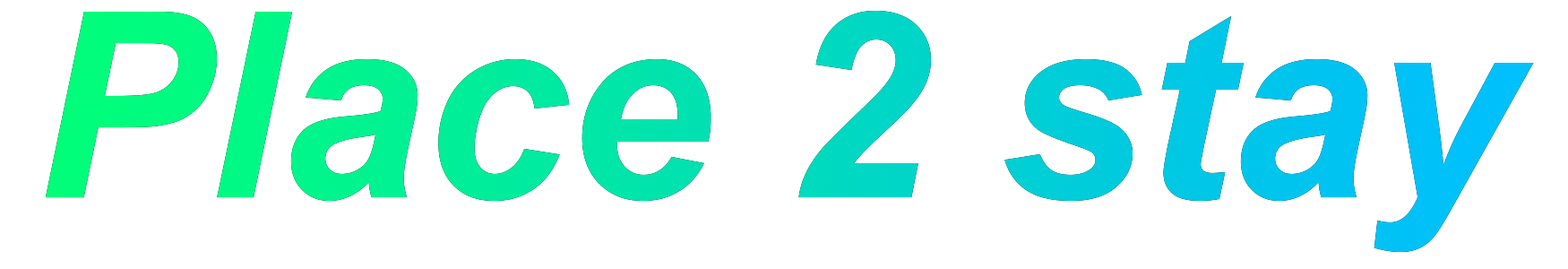
<style>
.page{position:relative;width:1568px;height:269px;background:#ffffff}
.page>*{position:absolute;margin:0}
.t1{font:258.8px "Arial-BoldItalicMT"}
</style>
<div class="page">
<p class="t1" style="left:45px;top:11px;width:1489px;height:241px">Place 2 stay</p>
</div>
